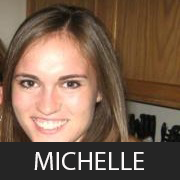
<style>
.page{position:relative;width:180px;height:180px}
.page>*{position:absolute;margin:0}
.t1{font:26.7px "MyriadPro-Regular";color:#faf7f7}
</style>
<div class="page">
<p class="t1" style="left:34px;top:152px;width:110px;height:18px">MICHELLE</p>
</div>
